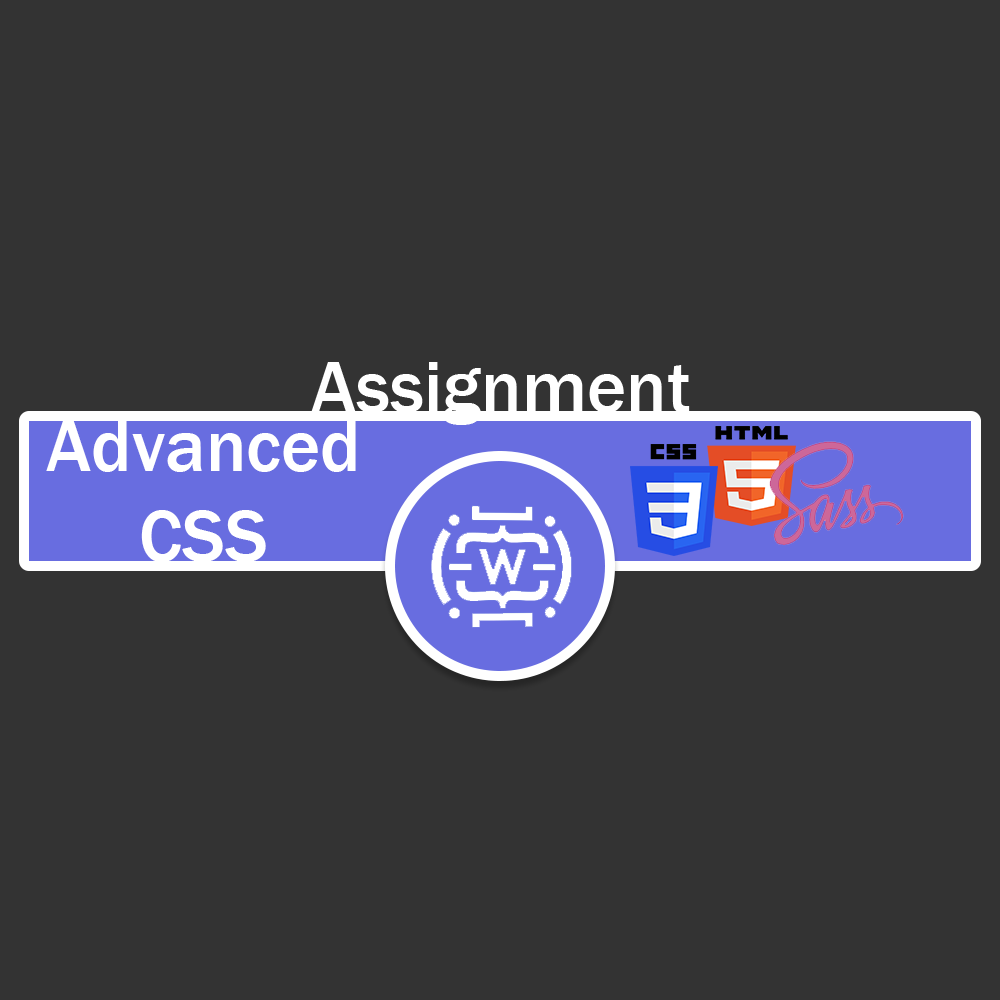
<style>
.page{position:relative;width:1000px;height:1000px;background:#333333}
.page>*{position:absolute;margin:0}
.t1{font:75px "FranklinGothic-Medium";color:#ffffff}
</style>
<div class="page">
<p class="t1" style="left:311px;top:362px;width:379px;height:63px">Assignment</p>
<p class="t1" style="left:46px;top:421px;width:310px;height:141px;text-align:center">Advanced<br>CSS</p>
</div>
